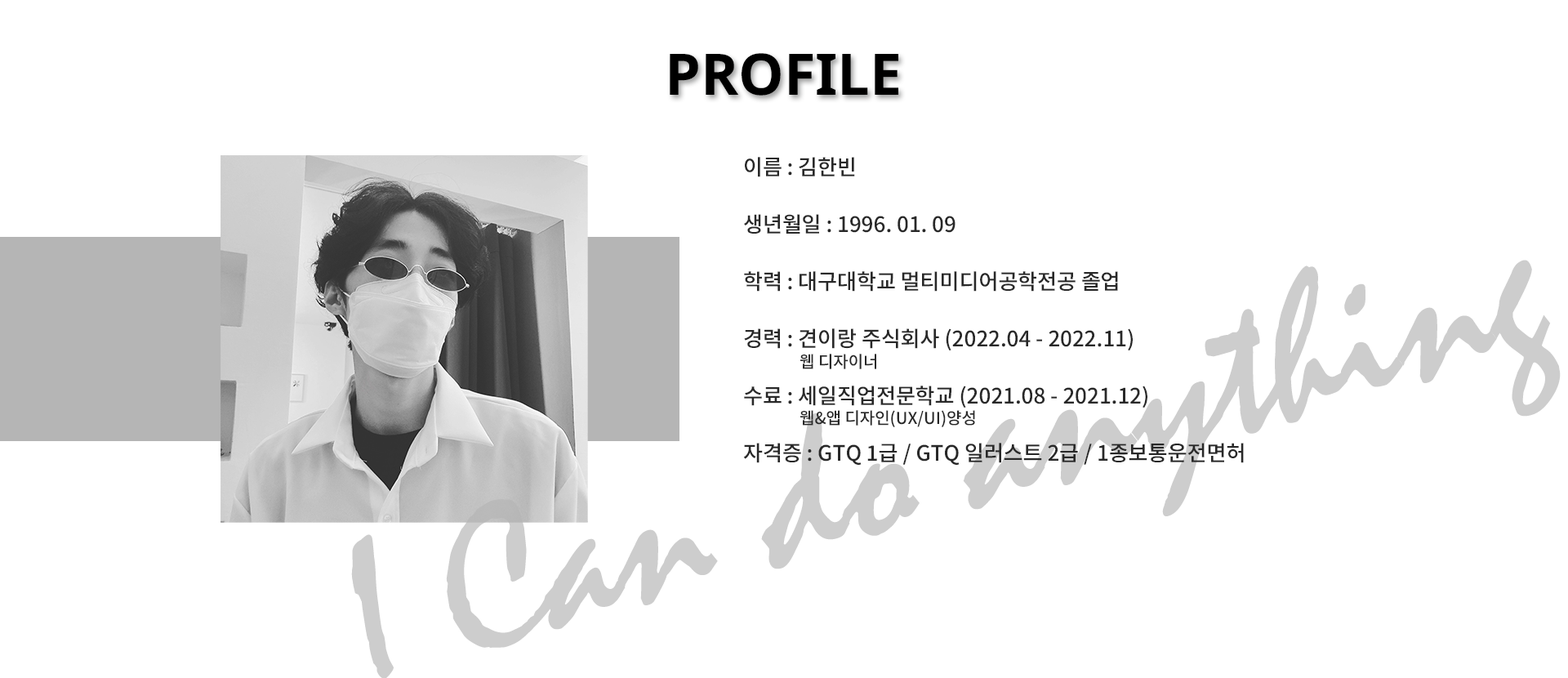
<style>
.page{position:relative;width:1568px;height:678px;background:#ffffff}
.page>*{position:absolute;margin:0}
.t1{font:57.2px "NotoSans-Bold";color:#000000}
.t2{font:21.2px/57.2px "NotoSansKR-Medium";color:#282828}
.t3{font:16.3px "NotoSansKR-Medium";color:#282828}
</style>
<div class="page">
<p class="t1" style="left:670px;top:53px;width:228px;height:43px">PROFILE</p>
<p class="t2" style="left:743px;top:157px;width:501px;height:308px">이름 : 김한빈<br>생년월일 : 1996. 01. 09 <br>학력 : 대구대학교 멀티미디어공학전공 졸업<br>경력 : 견이랑 주식회사 (2022.04 - 2022.11)<br>수료 : 세일직업전문학교 (2021.08 - 2021.12)<br>자격증 : GTQ 1급 / GTQ 일러스트 2급 / 1종보통운전면허</p>
<p class="t3" style="left:800px;top:354px;width:76px;height:15px">웹 디자이너</p>
<p class="t3" style="left:800px;top:410px;width:175px;height:17px">웹&amp;앱 디자인(UX/UI)양성</p>
</div>
